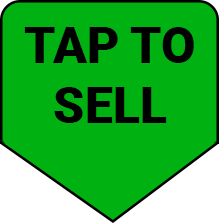
<style>
.page{position:relative;width:219px;height:223px;background:#00b211}
.page>*{position:absolute;margin:0}
.t1{font:50px "Roboto-Black";color:#000000}
</style>
<div class="page">
<p class="t1" style="left:24px;top:27px;width:170px;height:96px;text-align:center">TAP TO SELL</p>
</div>
